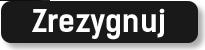
<style>
.page{position:relative;width:205px;height:50px;background:#191919}
.page>*{position:absolute;margin:0}
.t1{font:30px "KelsonSansBG-Bold";color:#ffffff}
</style>
<div class="page">
<p class="t1" style="left:32px;top:8px;width:133px;height:32px">Zrezygnuj</p>
</div>
